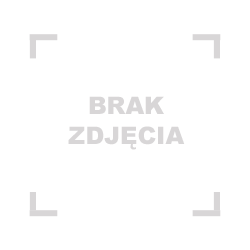
<style>
.page{position:relative;width:250px;height:250px;background:#ffffff}
.page>*{position:absolute;margin:0}
.t1{font:24px "Arial-Black";color:#d8d6d7}
</style>
<div class="page">
<p class="t1" style="left:89px;top:96px;width:75px;height:18px">BRAK</p>
<p class="t1" style="left:68px;top:126px;width:117px;height:24px">ZDJĘCIA</p>
</div>
